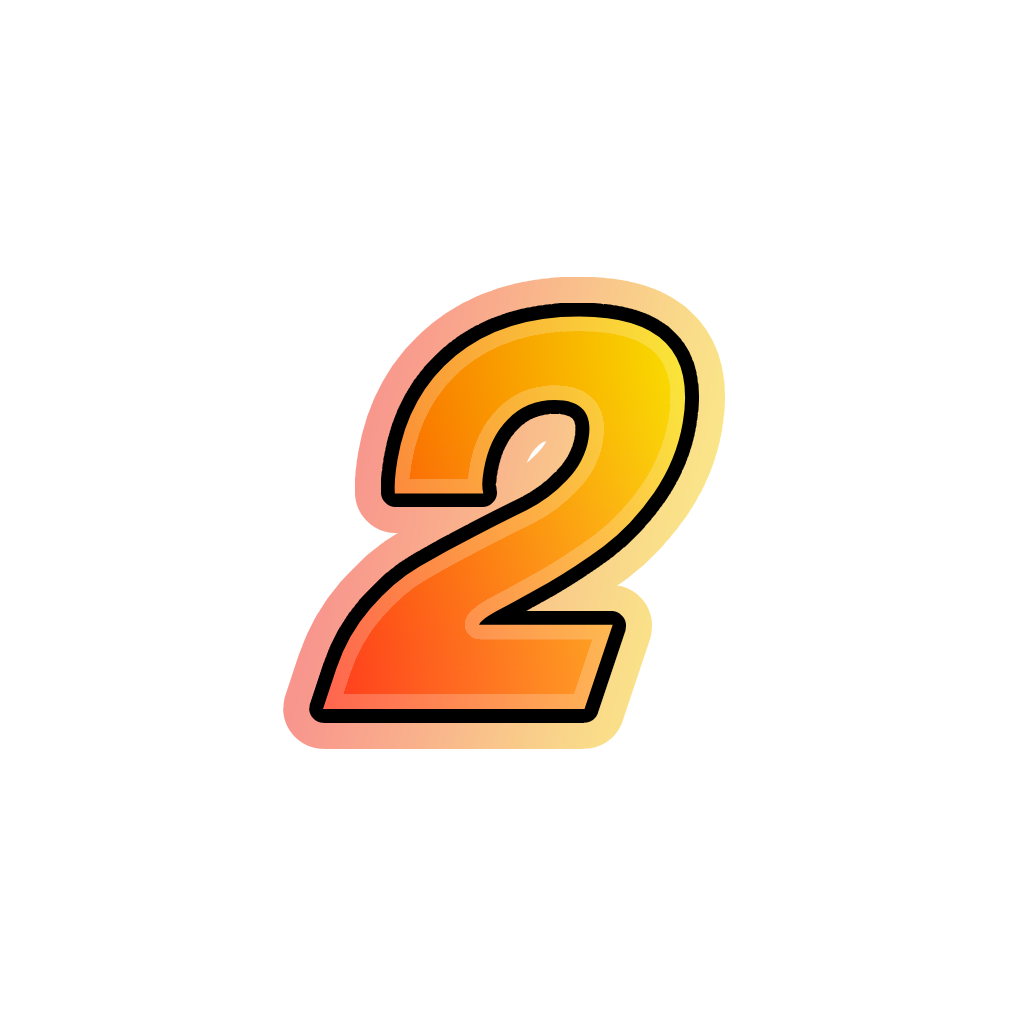
<style>
.page{position:relative;width:1024px;height:1024px;background:#ffffff}
.page>*{position:absolute;margin:0}
.t1{font:540px "FugazOne-Regular";font-style:italic;scale:0.93 1}
</style>
<div class="page">
<p class="t1" style="left:323px;top:316px;width:378px;height:393px">2</p>
</div>
